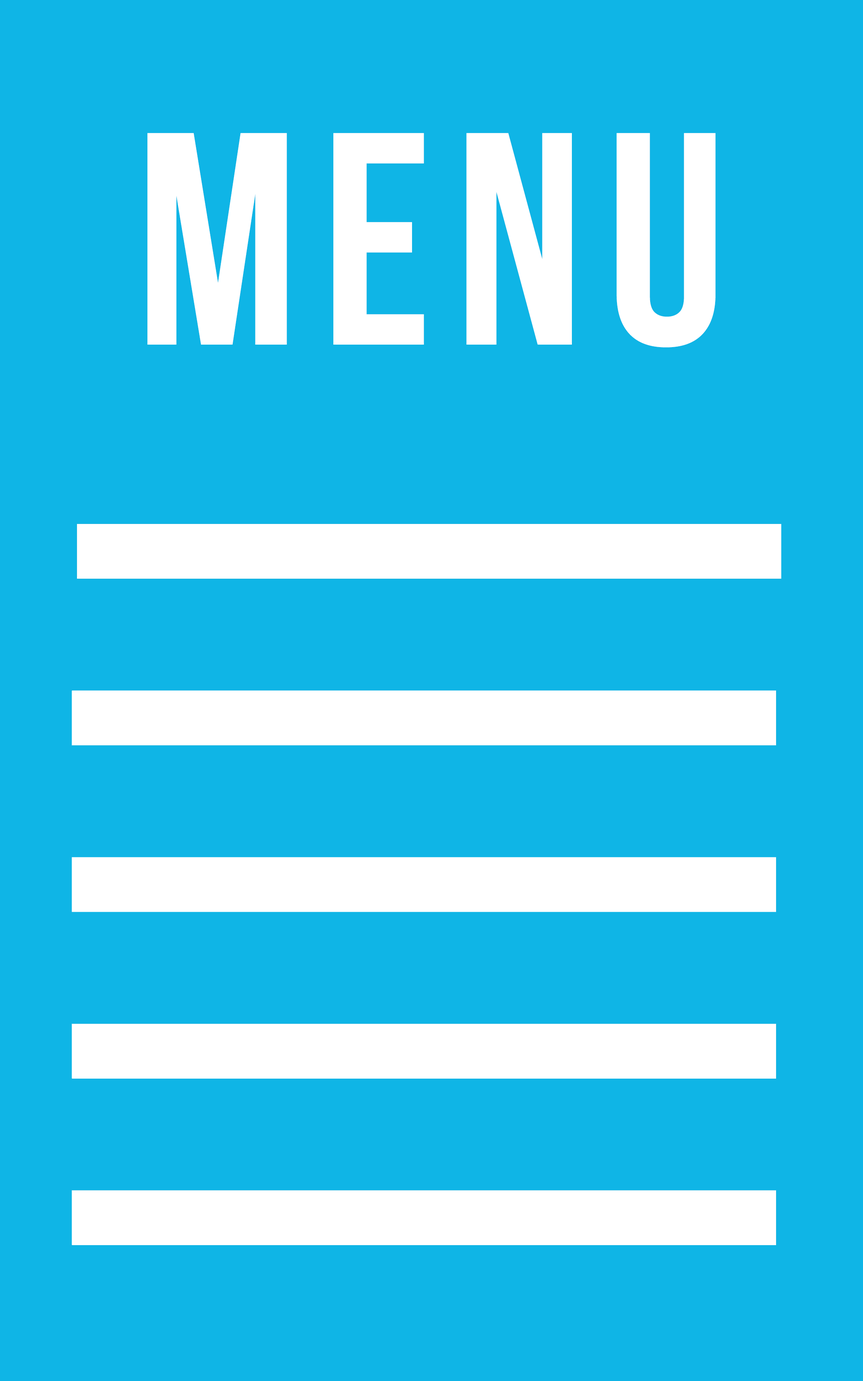
<style>
.page{position:relative;width:863px;height:1381px;background:#0fb5e6}
.page>*{position:absolute;margin:0}
.t1{font:302.1px "BebasNeue";letter-spacing:0.075em;color:#ffffff}
</style>
<div class="page">
<p class="t1" style="left:147px;top:133px;width:569px;height:215px">MENU</p>
</div>
